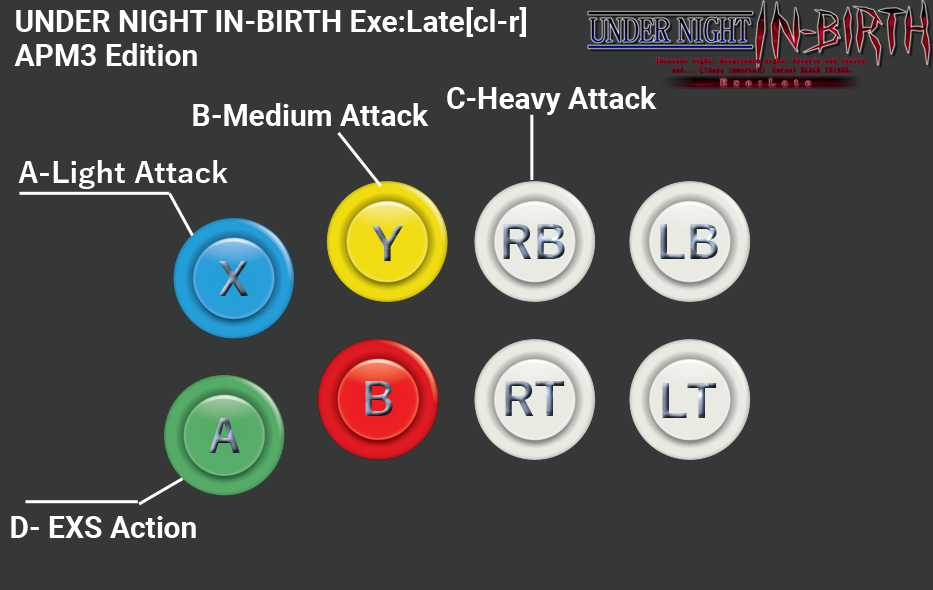
<style>
.page{position:relative;width:933px;height:590px;background:#363838}
.page>*{position:absolute;margin:0}
.t1{font:30px/34px "Roboto-Bold";color:#ffffff}
.t2{font:30px "Roboto-Bold";color:#ffffff}
.t3{font:30px "YuGothic-Bold";color:#ffffff}
</style>
<div class="page">
<p class="t1" style="left:14px;top:7px;width:512px;height:59px">UNDER NIGHT IN-BIRTH Exe:Late[cl-r]<br>APM3 Edition</p>
<p class="t2" style="left:447px;top:86px;width:210px;height:29px">C-Heavy Attack</p>
<p class="t2" style="left:193px;top:103px;width:236px;height:23px">B-Medium Attack</p>
<p class="t3" style="left:18px;top:160px;width:210px;height:29px">A-Light Attack</p>
<p class="t2" style="left:11px;top:516px;width:185px;height:22px">D- EXS Action</p>
</div>
